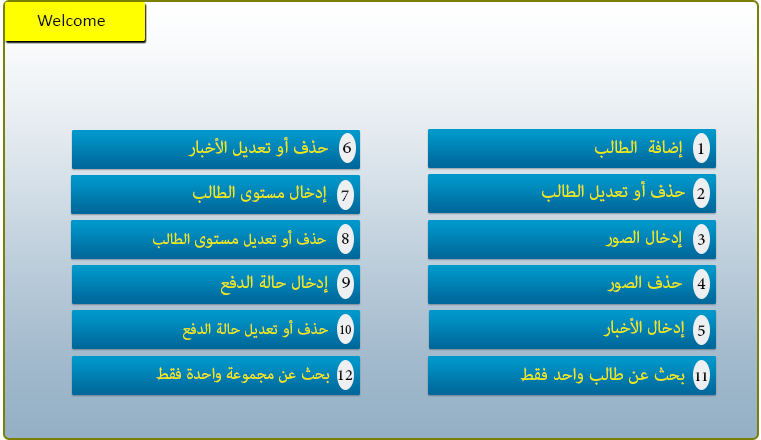
<style>
.page{position:relative;width:761px;height:440px}
.page>*{position:absolute;margin:0}
.t1{font:18px "Calibri";color:#0f0f0f}
.t2{font:24px "AdobeArabic-Regular";color:#eeeb07}
.t3{font:24px "AdobeArabic-Regular";color:#0f0f0f}
.t4{font:24px "AdobeArabic-Regular";color:#121212}
.t5{font:24px "AdobeArabic-Regular";color:#232323}
.t6{font:24px "AdobeArabic-Regular"}
.t7{font:21px "AdobeArabic-Regular";color:#eeeb07}
.t8{font:24px "AdobeArabic-Regular";color:#151515}
.t9{font:24px "AdobeArabic-Regular";color:#181818}
.t10{font:24px "AdobeArabic-Regular";color:#0c0c0c}
.t11{font:18px "AdobeArabic-Regular";color:#141414}
.t12{font:24px "AdobeArabic-Regular";color:#1d1d1d}
.t13{font:22px "AdobeArabic-Regular";color:#f9eb06}
.t14{font:22px "AdobeArabic-Regular";color:#0e0e0e}
.t15{font:20px "AdobeArabic-Bold";color:#0f0f0f}
</style>
<div class="page">
<p class="t1" style="left:37px;top:14px;width:68px;height:12px">Welcome</p>
<p class="t2" style="left:188px;top:137px;width:140px;height:21px">حذف أو تعديل الأخبار</p>
<p class="t3" style="left:343px;top:142px;width:8px;height:11px">6</p>
<p class="t2" style="left:595px;top:140px;width:88px;height:18px">إضافة  الطالب</p>
<p class="t4" style="left:698px;top:143px;width:6px;height:11px">1</p>
<p class="t2" style="left:193px;top:185px;width:134px;height:18px">إدخال مستوى الطالب</p>
<p class="t2" style="left:542px;top:181px;width:143px;height:21px">حذف أو تعديل الطالب</p>
<p class="t5" style="left:341px;top:190px;width:8px;height:11px">7</p>
<p class="t6" style="left:697px;top:188px;width:8px;height:11px">2</p>
<p class="t7" style="left:153px;top:230px;width:173px;height:19px">حذف أو تعديل <span class="t2">مستوى</span> الطالب</p>
<p class="t8" style="left:342px;top:233px;width:7px;height:11px">8</p>
<p class="t2" style="left:605px;top:230px;width:77px;height:18px">إدخال الصور</p>
<p class="t8" style="left:698px;top:234px;width:7px;height:11px">3</p>
<p class="t2" style="left:221px;top:275px;width:107px;height:20px">إدخال حالة الدفع</p>
<p class="t9" style="left:342px;top:277px;width:8px;height:11px">9</p>
<p class="t2" style="left:607px;top:275px;width:75px;height:17px">حذف الصور</p>
<p class="t10" style="left:697px;top:278px;width:9px;height:11px">4</p>
<p class="t2" style="left:603px;top:317px;width:82px;height:21px">إدخال الأخبار</p>
<p class="t7" style="left:183px;top:320px;width:145px;height:20px">حذف أو تعديل حالة الدفع</p>
<p class="t11" style="left:340px;top:325px;width:11px;height:9px">10</p>
<p class="t12" style="left:697px;top:325px;width:8px;height:11px">5</p>
<p class="t2" style="left:520px;top:366px;width:165px;height:19px">بحث عن طالب واحد فقط</p>
<p class="t13" style="left:156px;top:367px;width:174px;height:17px">بحث عن مجموعة واحدة فقط</p>
<p class="t14" style="left:338px;top:370px;width:15px;height:10px">12</p>
<p class="t15" style="left:695px;top:372px;width:12px;height:9px">11</p>
</div>
